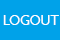
<style>
.page{position:relative;width:60px;height:40px;background:#00a2e9}
.page>*{position:absolute;margin:0}
.t1{font:13.9px "Humanist521BT-Roman";color:#fefefe}
</style>
<div class="page">
<p class="t1" style="left:3px;top:15px;width:56px;height:10px">LOGOUT</p>
</div>
